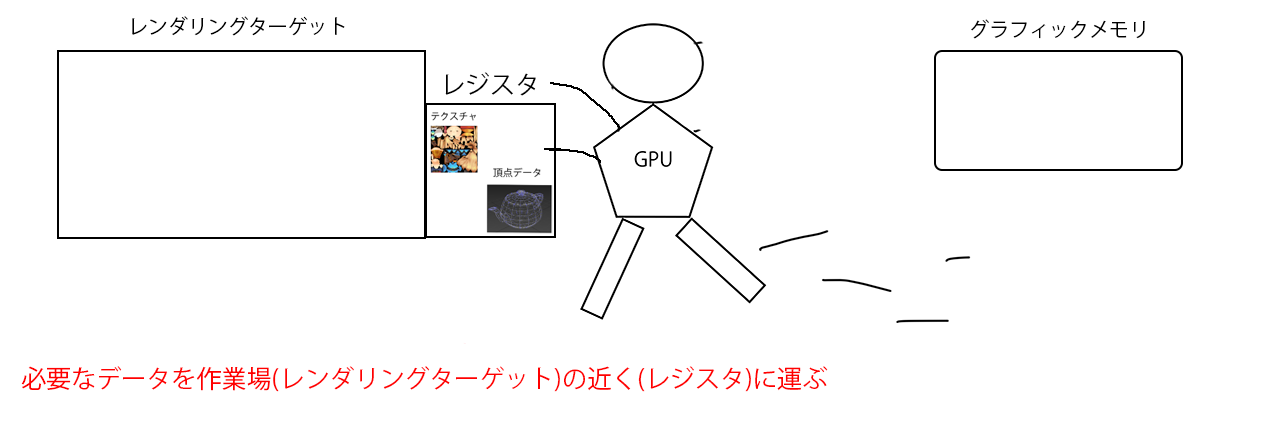
<style>
.page{position:relative;width:1265px;height:427px;background:#ffffff}
.page>*{position:absolute;margin:0}
.t1{font:20px "KozGoPr6N-Regular";color:#000000}
.t2{font:25px "KozGoPr6N-Regular";color:#000000}
.t3{font:25px "KozGoPr6N-Regular";color:#ff0000}
</style>
<div class="page">
<p class="t1" style="left:132px;top:16px;width:213px;height:20px">レンダリングターゲット</p>
<p class="t1" style="left:971px;top:19px;width:175px;height:20px">グラフィックメモリ</p>
<p class="t2" style="left:445px;top:72px;width:91px;height:24px">レジスタ</p>
<p class="t3" style="left:21px;top:366px;width:807px;height:26px">必要なデータを作業場(レンダリングターゲット)の近く(レジスタ)に運ぶ</p>
</div>
